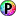
<style>
.page{position:relative;width:16px;height:16px}
.page>*{position:absolute;margin:0}
.t1{font:15px "FrutigerLT-Bold";color:#000000}
</style>
<div class="page">
<p class="t1" style="left:5px;top:3px;width:7px;height:11px">P</p>
</div>
